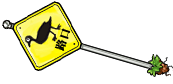
<style>
.page{position:relative;width:173px;height:84px;background:#ffffff}
.page>*{position:absolute;margin:0}
.t1{font:10.6px "SourceHanSerifCN-Heavy";color:#000000;text-transform:uppercase}
</style>
<div class="page">
<p class="t1" style="left:54px;top:28px;width:16px;height:23px;rotate:-72deg">路口</p>
</div>
